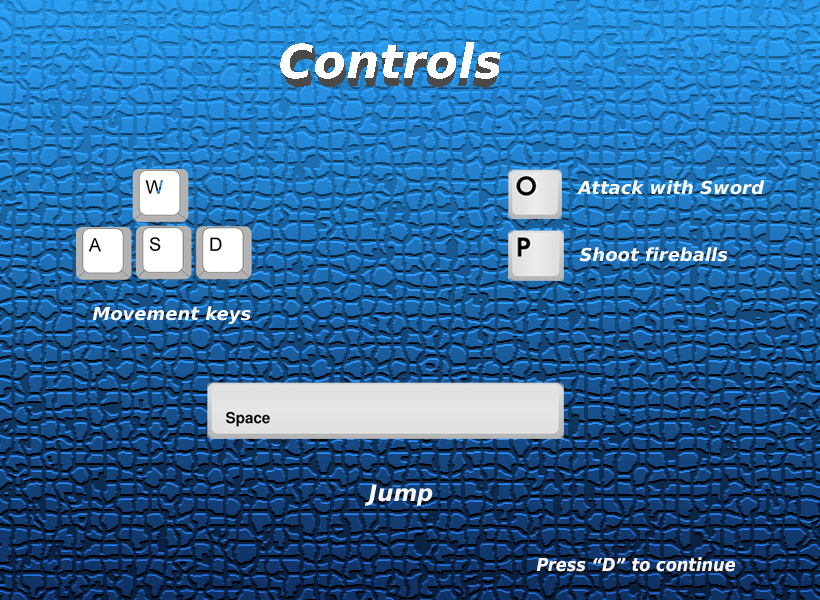
<style>
.page{position:relative;width:820px;height:600px}
.page>*{position:absolute;margin:0}
.t1{font:18px "DejaVuSans-BoldOblique";color:#fefbfb}
.t2{font:22.7px "DejaVuSans-BoldOblique";color:#fefbfb}
.t3{font:18px "DejaVuSansCondensed-BoldOblique";color:#fdf8f8}
</style>
<div class="page">
<p class="t1" style="left:577px;top:180px;width:188px;height:15px">Attack with Sword</p>
<p class="t1" style="left:579px;top:247px;width:149px;height:15px">Shoot fireballs</p>
<p class="t1" style="left:92px;top:306px;width:159px;height:18px">Movement keys</p>
<p class="t2" style="left:365px;top:484px;width:68px;height:22px">Jump</p>
<p class="t3" style="left:536px;top:557px;width:199px;height:15px">Press “D” to continue</p>
</div>
